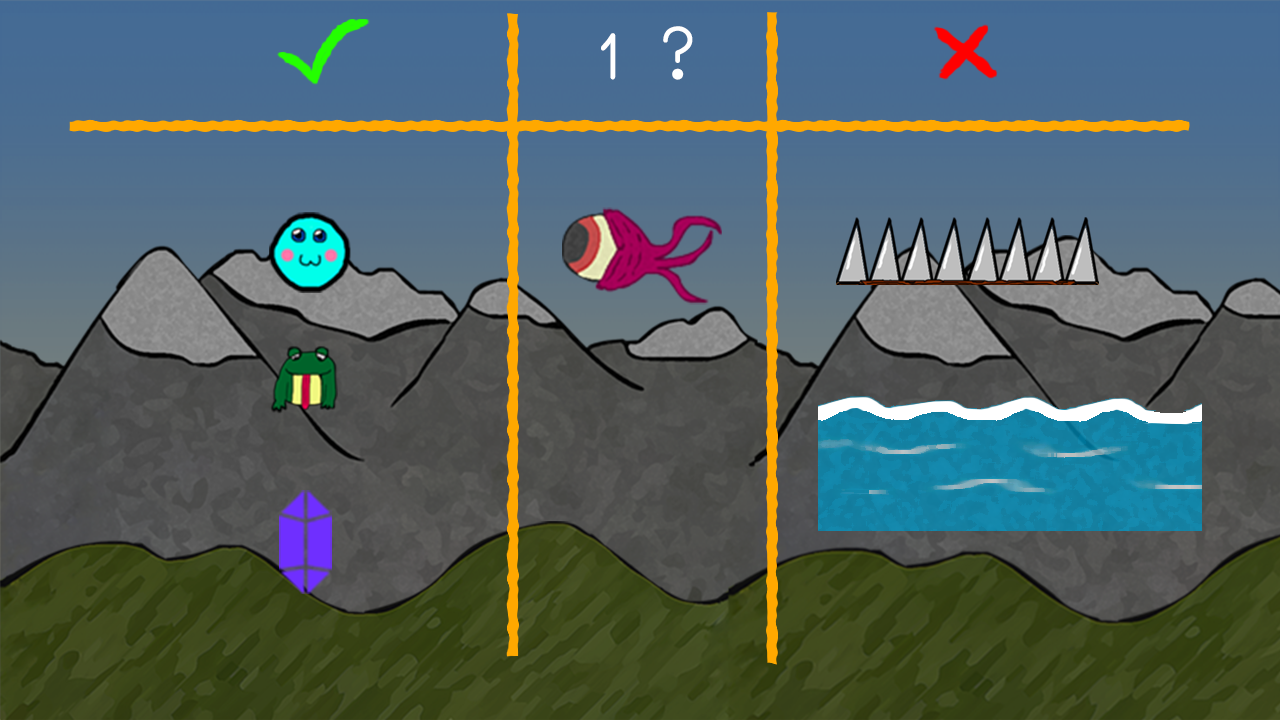
<style>
.page{position:relative;width:1280px;height:720px}
.page>*{position:absolute;margin:0}
.t1{font:70.7px "KAWAIITEGAKIMOJI";color:#ffffff}
</style>
<div class="page">
<p class="t1" style="left:601px;top:26px;width:92px;height:54px">1 ?</p>
</div>
